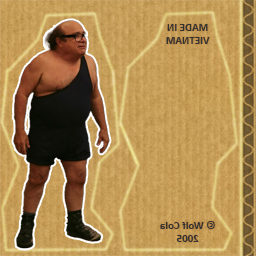
<style>
.page{position:relative;width:256px;height:256px}
.page>*{position:absolute;margin:0}
.t1{font:11px "Calibri-Bold";color:#333333}
</style>
<div class="page">
<p class="t1" style="left:160px;top:24px;width:55px;height:218px;text-align:center;rotate:180deg">MADE IN<br>VIETNAM<br><br><br><br><br><br><br><br><br><br><br><br><br><br>© Wolf Cola<br>2005</p>
</div>
